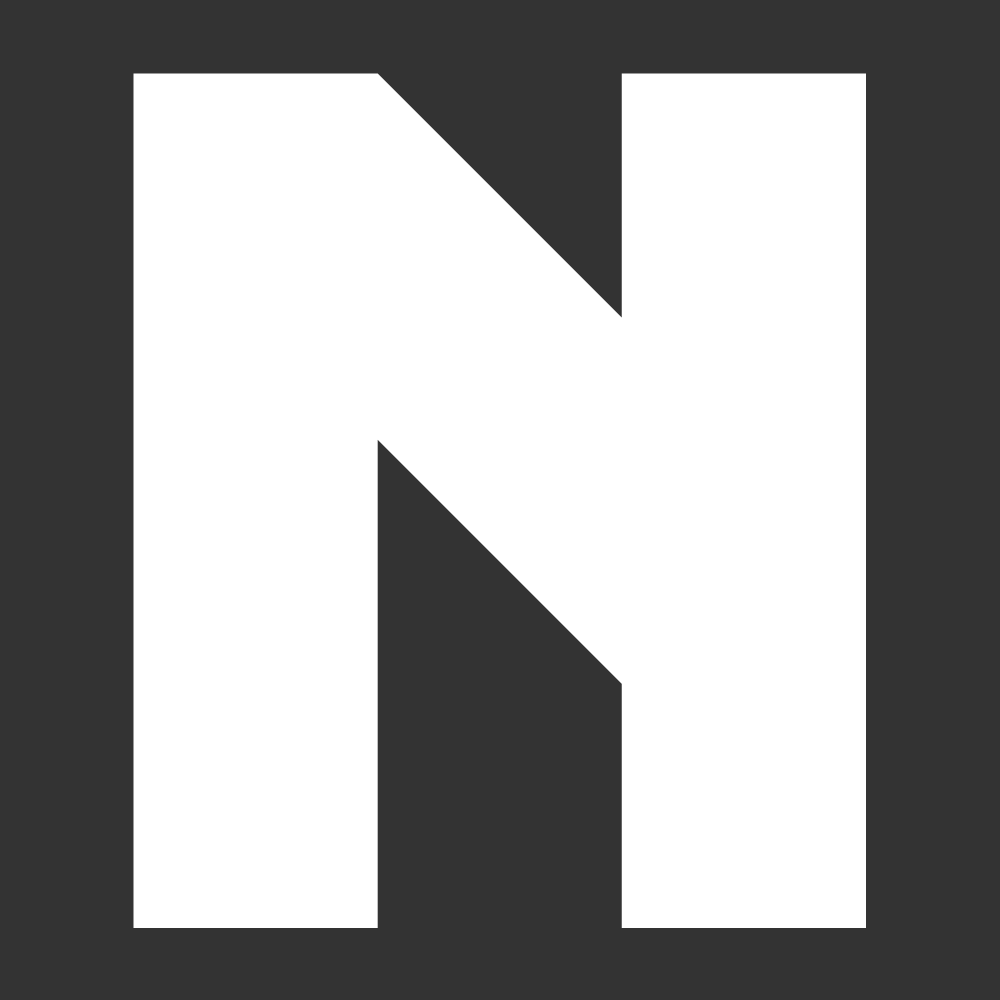
<style>
.page{position:relative;width:1000px;height:1000px;background:#333333}
.page>*{position:absolute;margin:0}
.t1{font:1250px "NeonOverdrive";letter-spacing:0.01em;color:#ffffff}
</style>
<div class="page">
<p class="t1" style="left:133px;top:73px;width:733px;height:855px">n</p>
</div>
